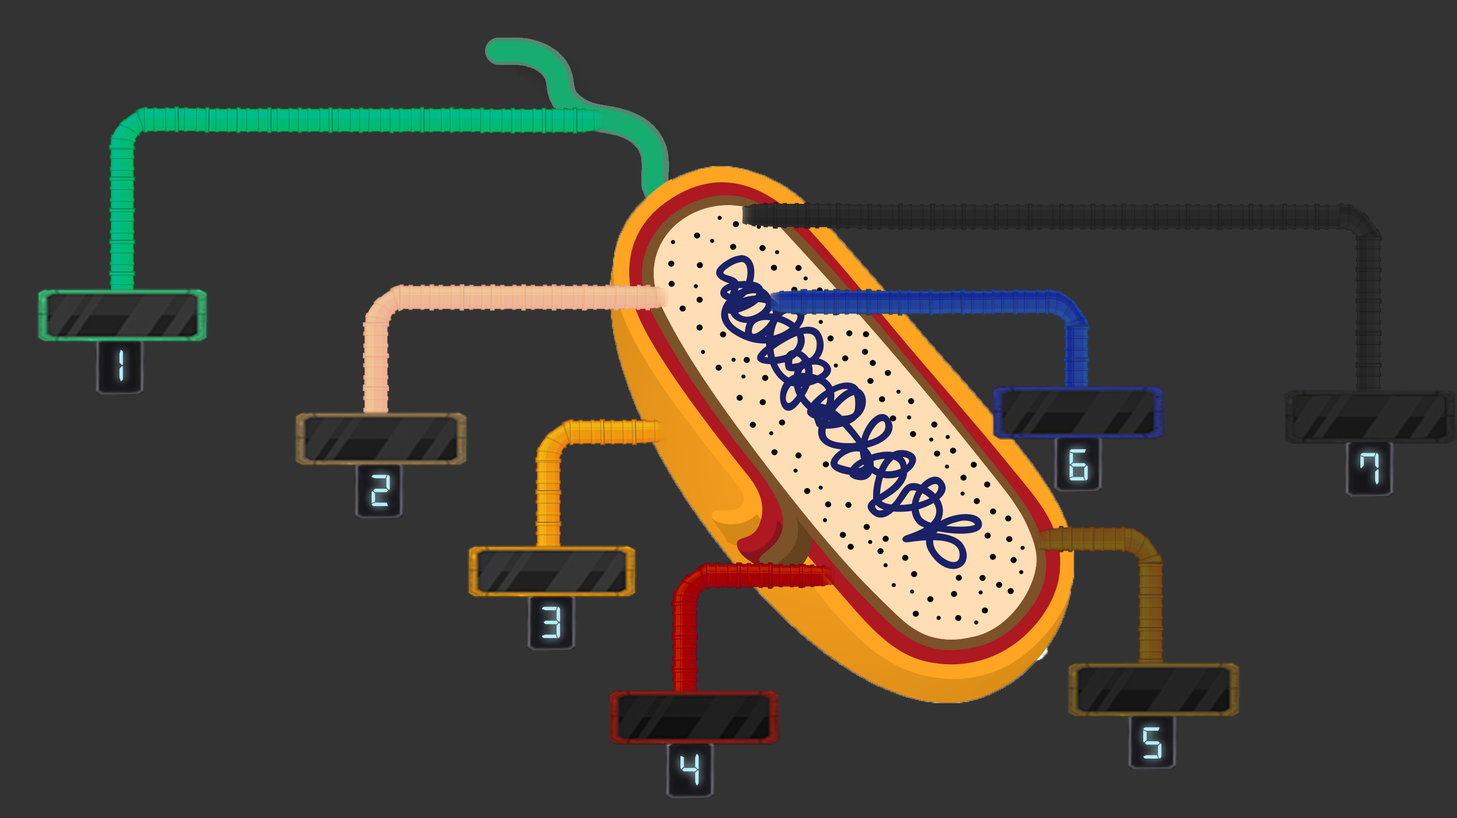
<style>
.page{position:relative;width:1457px;height:818px;background:#333333}
.page>*{position:absolute;margin:0}
.t1{font:47.7px "Digital-7";letter-spacing:0.01em;color:#b8edf6}
</style>
<div class="page">
<p class="t1" style="left:119px;top:350px;width:4px;height:31px">1</p>
<p class="t1" style="left:1069px;top:449px;width:19px;height:32px">6</p>
<p class="t1" style="left:1360px;top:453px;width:19px;height:32px">7</p>
<p class="t1" style="left:372px;top:475px;width:18px;height:31px">2</p>
<p class="t1" style="left:542px;top:607px;width:18px;height:31px">3</p>
<p class="t1" style="left:1143px;top:727px;width:19px;height:32px">5</p>
<p class="t1" style="left:680px;top:754px;width:19px;height:32px">4</p>
</div>
